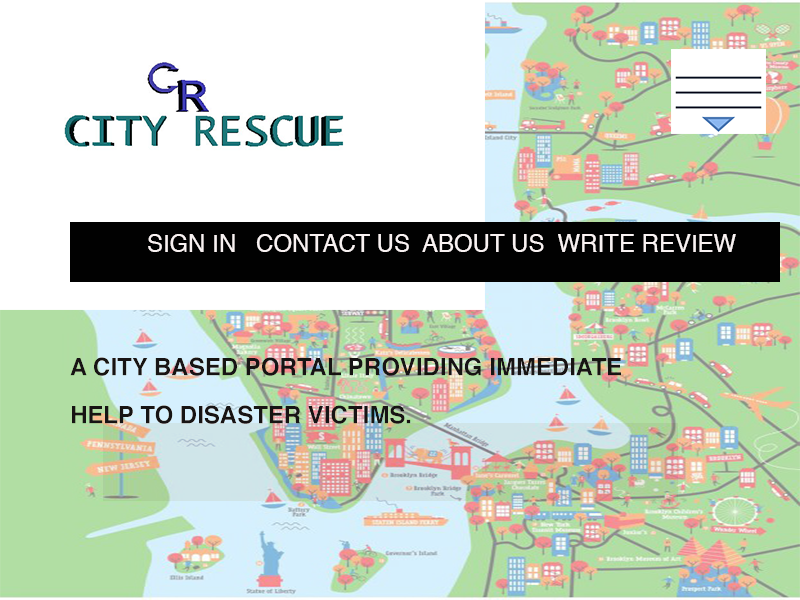
<style>
.page{position:relative;width:800px;height:600px;background:#ffffff}
.page>*{position:absolute;margin:0}
.t1{font:24px "Helvetica";color:#f9f2f2;text-transform:uppercase}
.t2{font:24px/48px "Helvetica-Bold";color:#171414;text-transform:uppercase}
</style>
<div class="page">
<p class="t1" style="left:148px;top:234px;width:588px;height:18px">sign in   contact us  about us  write review</p>
<p class="t2" style="left:70px;top:357px;width:551px;height:67px">A City based portal providing immediate help to disaster victims.</p>
</div>
